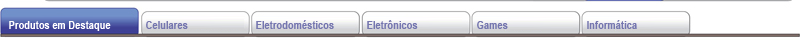
<style>
.page{position:relative;width:800px;height:40px;background:#ffffff}
.page>*{position:absolute;margin:0}
.t1{font:10.7px "Arial-BoldMT";color:#ffffff;scale:0.87 1}
.t2{font:10.7px "Arial-BoldMT";color:#7576af;scale:0.87 1}
</style>
<div class="page">
<p class="t1" style="left:9px;top:21px;width:102px;height:10px">Produtos em Destaque</p>
<p class="t2" style="left:146px;top:21px;width:42px;height:8px">Celulares</p>
<p class="t2" style="left:256px;top:20px;width:78px;height:9px">Eletrodomésticos</p>
<p class="t2" style="left:367px;top:20px;width:51px;height:9px">Eletrônicos</p>
<p class="t2" style="left:477px;top:21px;width:31px;height:8px">Games</p>
<p class="t2" style="left:587px;top:20px;width:50px;height:9px">Informática</p>
</div>
